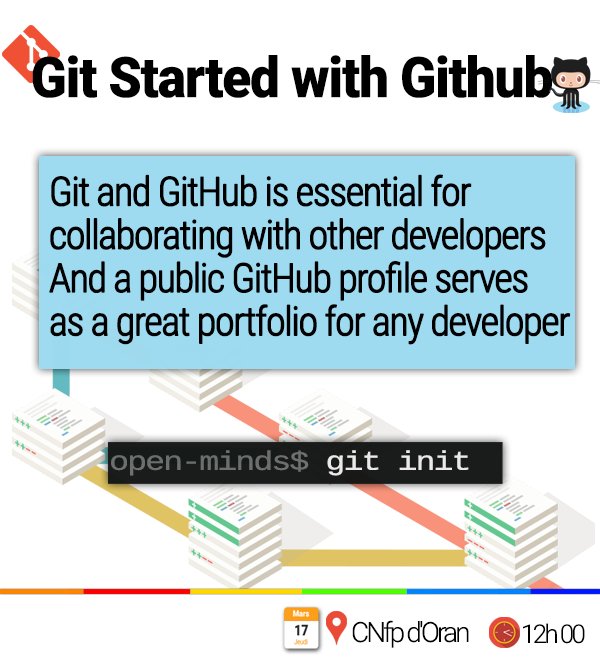
<style>
.page{position:relative;width:600px;height:662px;background:#ffffff}
.page>*{position:absolute;margin:0}
.t1{font:56.2px "Roboto-Black";letter-spacing:-0.02em;color:#000000;scale:0.94 1}
.t2{font:40px/43.2px "RobotoCondensed-Light";letter-spacing:-0.06em;color:#000000;font-weight:bold}
.t3{font:26.7px "LiberationMono";letter-spacing:-0.06em;color:#6c6c6c;scale:1.25 1}
.t4{font:26.7px "LiberationMono";letter-spacing:-0.06em;color:#ebe9e9;scale:1.25 1}
.t5{font:27.9px "Roboto-Light";letter-spacing:-0.1em;color:#000000}
.t6{font:25.9px "Roboto-Light";letter-spacing:-0.1em;color:#000000}
</style>
<div class="page">
<p class="t1" style="left:32px;top:55px;width:520px;height:43px">Git Started with Github</p>
<p class="t2" style="left:49px;top:174px;width:522px;height:171px">Git and GitHub is essential for <br>collaborating with other developers<br>And a public GitHub profile serves <br>as a great portfolio for any developer</p>
<p class="t3" style="left:111px;top:450px;width:358px;height:26px">open-minds$<span class="t4"> git init</span></p>
<p class="t5" style="left:352px;top:620px;width:117px;height:28px">CNfp d'Oran</p>
<p class="t6" style="left:523px;top:623px;width:62px;height:21px">12h 00</p>
</div>
